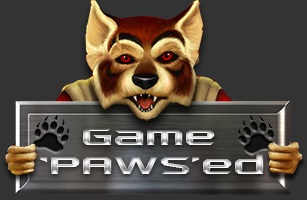
<style>
.page{position:relative;width:307px;height:200px;background:#333333}
.page>*{position:absolute;margin:0}
.t1{font:28.5px "AeromaticsSmallCapsNC";scale:1.21 1}
</style>
<div class="page">
<p class="t1" style="left:83px;top:128px;width:132px;height:17px">Game</p>
<p class="t1" style="left:40px;top:153px;width:224px;height:21px">‘PAWS’ed</p>
</div>
